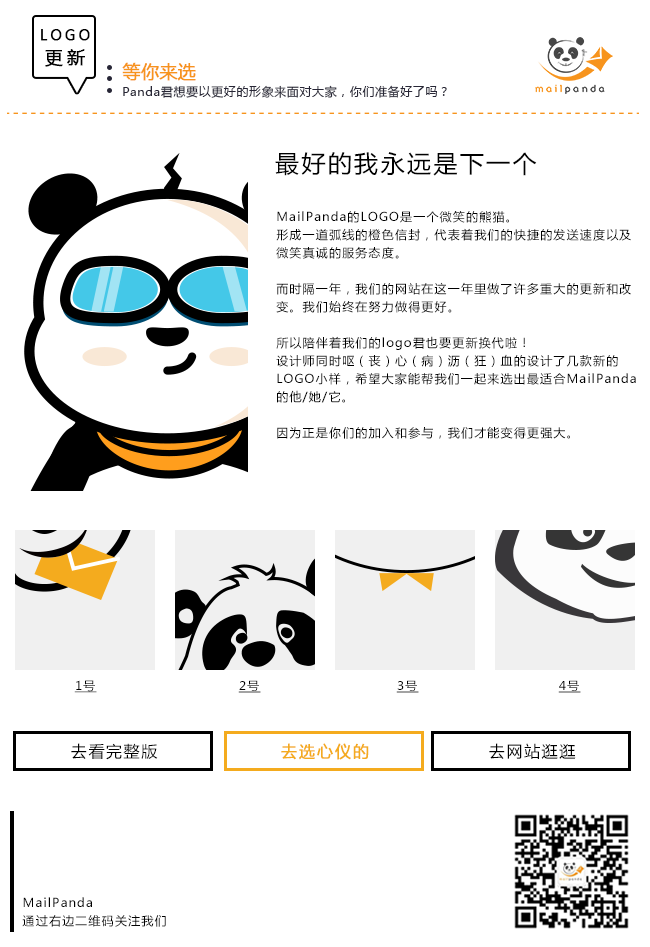
<style>
.page{position:relative;width:650px;height:947px;background:#ffffff}
.page>*{position:absolute;margin:0}
.t1{font:14px/24px "MicrosoftYaHei";letter-spacing:0.2em;color:#000000;font-weight:bold}
.t2{font:18px/24px "MicrosoftYaHei";letter-spacing:0.2em;color:#000000;font-weight:bold}
.t3{font:12px/18px "MicrosoftYaHei";letter-spacing:0.05em;color:#272636}
.t4{font:18px/18px "MicrosoftYaHei";color:#f7941d;font-weight:bold}
.t5{font:24px "MicrosoftYaHei";letter-spacing:0.1em;color:#000000}
.t6{font:12px/18px "MicrosoftYaHei";letter-spacing:0.1em;color:#000000}
.t7{font:12px "MicrosoftYaHei";letter-spacing:0.1em;color:#000000;text-decoration:underline}
.t8{font:11.6px "MicrosoftYaHei";letter-spacing:0.1em;color:#000000;text-decoration:underline;scale:1.03 1}
.t9{font:16px "MicrosoftYaHei";letter-spacing:0.1em;color:#000000}
.t10{font:16px "MicrosoftYaHei";letter-spacing:0.1em;color:#f4ab1e;font-weight:bold}
</style>
<div class="page">
<p class="t1" style="left:41px;top:29px;width:49px;height:38px;text-align:center">LOGO<br><span class="t2">更新</span></p>
<p class="t3" style="left:122px;top:62px;width:325px;height:36px"><span class="t4">等你来选<br></span>Panda君想要以更好的形象来面对大家，你们准备好了吗？</p>
<p class="t5" style="left:275px;top:152px;width:262px;height:24px">最好的我永远是下一个</p>
<p class="t6" style="left:276px;top:211px;width:360px;height:228px">MailPanda的LOGO是一个微笑的熊猫。<br>形成一道弧线的橙色信封，代表着我们的快捷的发送速度以及微笑真诚的服务态度。<br><br>而时隔一年，我们的网站在这一年里做了许多重大的更新和改变。我们始终在努力做得更好。<br><br>所以陪伴着我们的logo君也要更新换代啦！<br>设计师同时呕（丧）心（病）沥（狂）血的设计了几款新的LOGO小样，希望大家能帮我们一起来选出最适合MailPanda的他/她/它。<br><br>因为正是你们的加入和参与，我们才能变得更强大。</p>
<p class="t7" style="left:74px;top:680px;width:23px;height:13px">1号</p>
<p class="t8" style="left:238px;top:680px;width:23px;height:13px">2号</p>
<p class="t8" style="left:396px;top:680px;width:23px;height:13px">3号</p>
<p class="t8" style="left:558px;top:680px;width:23px;height:13px">4号</p>
<p class="t9" style="left:71px;top:743px;width:87px;height:17px">去看完整版</p>
<p class="t10" style="left:281px;top:743px;width:88px;height:17px">去选心仪的</p>
<p class="t9" style="left:489px;top:743px;width:87px;height:16px">去网站逛逛</p>
<p class="t6" style="left:22px;top:897px;width:144px;height:30px">MailPanda<br>通过右边二维码关注我们</p>
</div>
